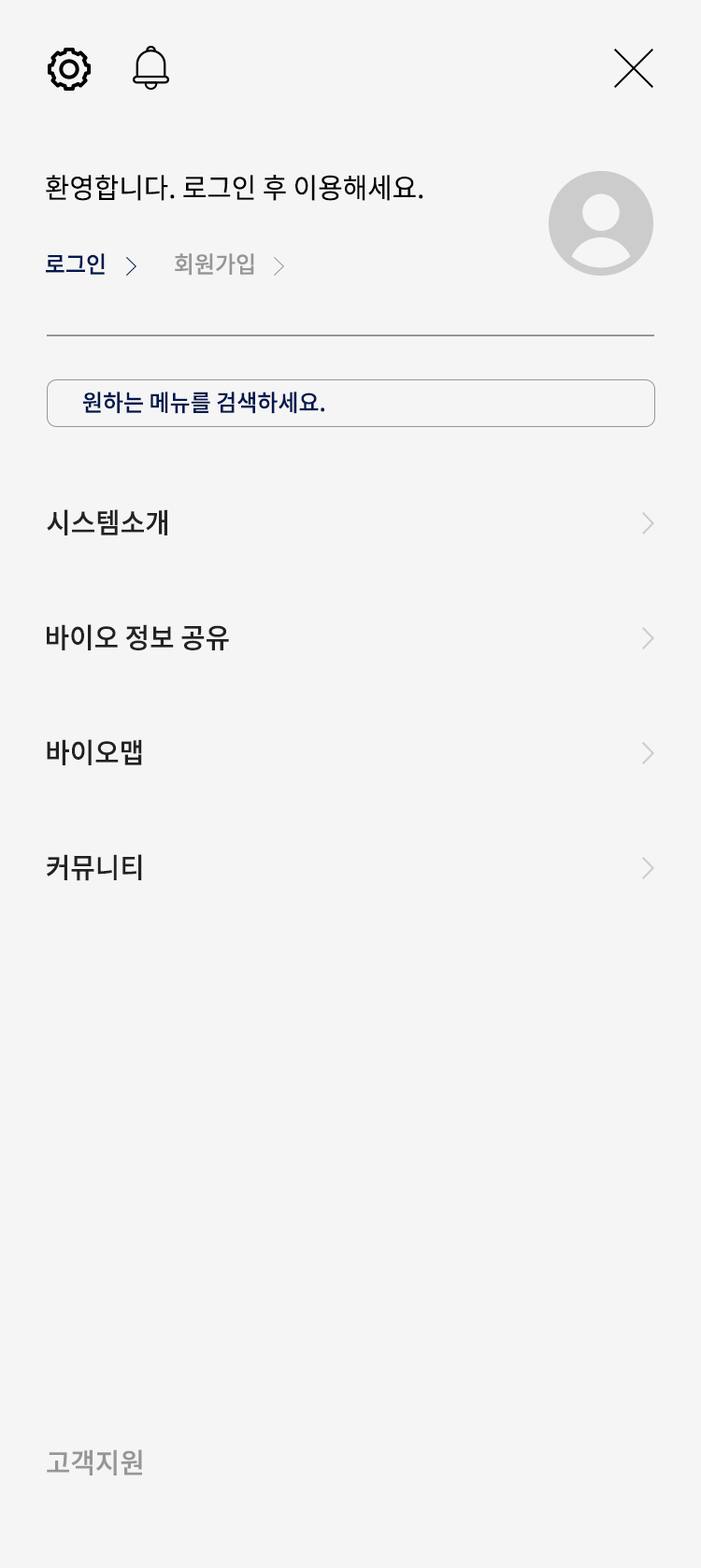
<style>
.page{position:relative;width:701px;height:1568px;background:#f5f5f5}
.page>*{position:absolute;margin:0}
.t1{font:28px "NotoSansKR-Regular";color:#010000;scale:0.96 1}
.t2{font:23.4px "NotoSansKR-Medium";color:#00194f;scale:0.96 1}
.t3{font:23.4px "NotoSansKR-Medium";color:#969696;scale:0.96 1}
.t4{font:28px "NotoSansKR-Medium";color:#222222;scale:0.96 1}
.t5{font:28px "NotoSansKR-Medium";color:#969696;scale:0.96 1}
</style>
<div class="page">
<p class="t1" style="left:46px;top:175px;width:377px;height:26px">환영합니다. 로그인 후 이용해세요.</p>
<p class="t2" style="left:46px;top:253px;width:59px;height:22px">로그인</p>
<p class="t3" style="left:175px;top:253px;width:79px;height:23px">회원가입</p>
<p class="t2" style="left:82px;top:392px;width:242px;height:22px">원하는 메뉴를 검색하세요.</p>
<p class="t4" style="left:47px;top:509px;width:120px;height:26px">시스템소개</p>
<p class="t4" style="left:47px;top:624px;width:182px;height:26px">바이오 정보 공유</p>
<p class="t4" style="left:47px;top:739px;width:95px;height:26px">바이오맵</p>
<p class="t4" style="left:47px;top:854px;width:95px;height:27px">커뮤니티</p>
<p class="t5" style="left:47px;top:1449px;width:95px;height:26px">고객지원</p>
</div>
